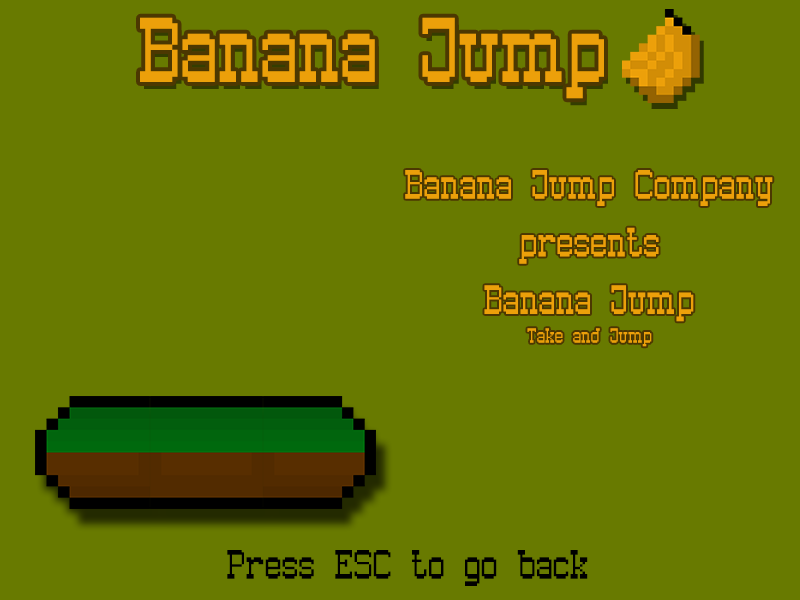
<style>
.page{position:relative;width:800px;height:600px;background:#687a00}
.page>*{position:absolute;margin:0}
.t1{font:106.7px "Old_Pixel-7";color:#eca00a}
.t2{font:48px "Old_Pixel-7";color:#eca00a}
.t3{font:24px "Old_Pixel-7";color:#eca00a}
.t4{font:48px "Old_Pixel-7";color:#000000}
</style>
<div class="page">
<p class="t1" style="left:140px;top:17px;width:464px;height:82px">Banana Jump</p>
<p class="t2" style="left:405px;top:170px;width:368px;height:177px;text-align:center">Banana Jump Company<br>presents<br>Banana Jump<br><span class="t3">Take and Jump</span></p>
<p class="t4" style="left:227px;top:550px;width:361px;height:36px">Press ESC to go back</p>
</div>
